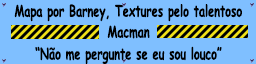
<style>
.page{position:relative;width:256px;height:64px;background:#7fbfff}
.page>*{position:absolute;margin:0}
.t1{font:16px "ComicSansMS-Bold";color:#000000;scale:0.69 1}
.t2{font:12px "ComicSansMS-Bold";color:#000000;scale:0.69 1}
</style>
<div class="page">
<p class="t1" style="left:14px;top:4px;width:228px;height:18px">Mapa por Barney, Textures pelo talentoso</p>
<p class="t2" style="left:107px;top:25px;width:43px;height:14px">Macman</p>
<p class="t2" style="left:35px;top:46px;width:187px;height:18px">“Não me pergunte se eu sou louco”</p>
</div>
